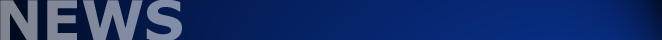
<style>
.page{position:relative;width:662px;height:40px}
.page>*{position:absolute;margin:0}
.t1{font:56px "Verdana-Bold";letter-spacing:-0.005em;color:#81899c}
</style>
<div class="page">
<p class="t1" style="left:0px;top:0px;width:182px;height:42px">NEWS</p>
</div>
